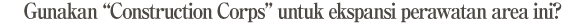
<style>
.page{position:relative;width:586px;height:24px;background:#ffffff}
.page>*{position:absolute;margin:0}
.t1{font:22px "RyuminPro-ExBold";letter-spacing:-0.08em;color:#4c4843;scale:0.9 1}
</style>
<div class="page">
<p class="t1" style="left:24px;top:2px;width:538px;height:21px">Gunakan “Construction Corps” untuk ekspansi perawatan area ini?</p>
</div>
